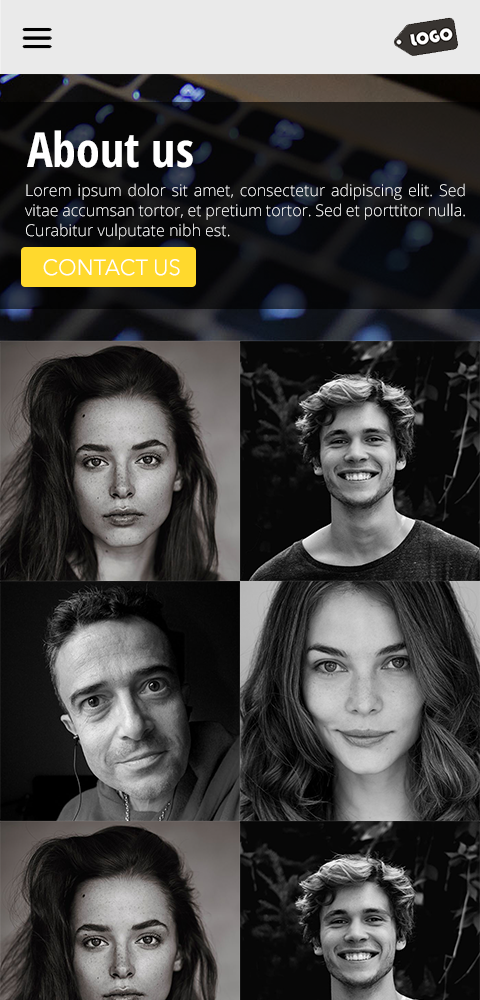
<style>
.page{position:relative;width:480px;height:1000px}
.page>*{position:absolute;margin:0}
.t1{font:48px "OpenSans-CondensedBold";color:#ffffff}
.t2{font:16px/20px "OpenSans-Light";color:#ffffff}
.t3{font:22px "AvenirNext-Regular";color:#ffffff}
</style>
<div class="page">
<p class="t1" style="left:27px;top:130px;width:166px;height:38px">About us</p>
<p class="t2" style="left:25px;top:183px;width:440px;height:57px;text-align:justify">Lorem ipsum dolor sit amet, consectetur adipiscing elit. Sed vitae accumsan tortor, et pretium tortor. Sed et porttitor nulla. Curabitur vulputate nibh est.</p>
<p class="t3" style="left:43px;top:259px;width:137px;height:17px">CONTACT US</p>
</div>
